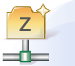
<style>
.page{position:relative;width:75px;height:66px}
.page>*{position:absolute;margin:0}
.t1{font:28.4px "MyriadPro-Regular";color:#555555}
</style>
<div class="page">
<p class="t1" style="left:19px;top:17px;width:12px;height:14px">z</p>
</div>
